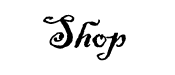
<style>
.page{position:relative;width:175px;height:75px;background:#ffffff}
.page>*{position:absolute;margin:0}
.t1{font:48px "BlackadderITC-Regular";letter-spacing:-0.025em;color:#000000}
</style>
<div class="page">
<p class="t1" style="left:43px;top:14px;width:83px;height:47px">Shop</p>
</div>
